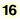
<style>
.page{position:relative;width:20px;height:20px}
.page>*{position:absolute;margin:0}
.t1{font:14px "Helvetica-Bold";color:#000000;scale:1.1 1}
</style>
<div class="page">
<p class="t1" style="left:2px;top:4px;width:15px;height:12px">16</p>
</div>
